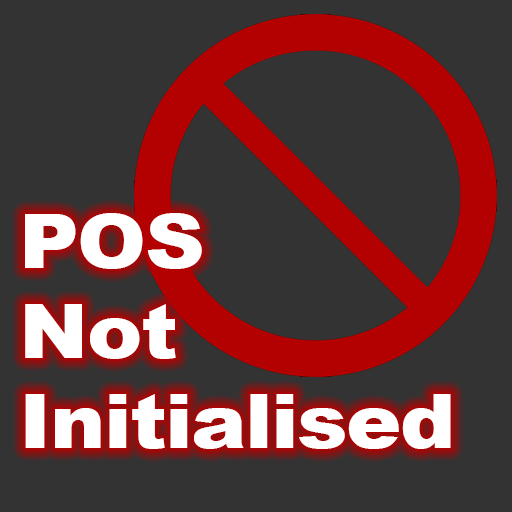
<style>
.page{position:relative;width:512px;height:512px;background:#333333}
.page>*{position:absolute;margin:0}
.t1{font:75px "Arial-Black";letter-spacing:-0.02em;color:#ffffff;scale:1.11 1}
</style>
<div class="page">
<p class="t1" style="left:25px;top:213px;width:426px;height:236px">POS<br>Not<br>Initialised</p>
</div>
